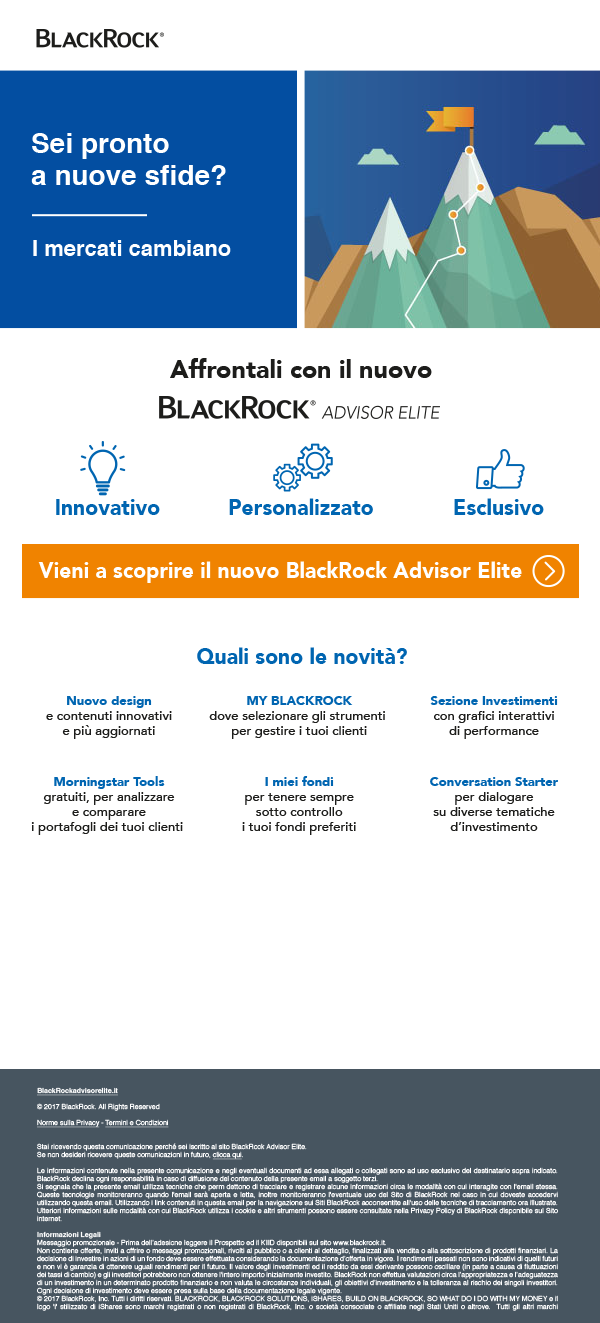
<style>
.page{position:relative;width:600px;height:1323px;background:#ffffff}
.page>*{position:absolute;margin:0}
.t1{font:28px/32px "Helvetica-Bold";color:#ffffff}
.t2{font:22px "Helvetica-Bold";color:#ffffff}
.t3{font:25px "Avenir-Black";color:#1d1d1b}
.t4{font:22.3px "Avenir-Black";color:#0065b1;scale:0.95 1}
.t5{font:22.3px "Avenir-Black";color:#ffffff;scale:0.95 1}
.t6{font:13px/15px "Avenir-Medium";color:#1d1d1b}
.t7{font:13px/15px "Avenir-Black";color:#0065b1}
.t8{font:7px/8px "Helvetica";color:#ffffff}
.t9{font:7px/8px "Helvetica-Bold";color:#ffffff;text-decoration:underline}
.t10{font:7px/8px "Helvetica";color:#ffffff;text-decoration:underline}
.t11{font:7px/8px "Helvetica-Bold";color:#ffffff}
</style>
<div class="page">
<p class="t1" style="left:31px;top:133px;width:195px;height:52px">Sei pronto<br>a nuove sfide?</p>
<p class="t2" style="left:33px;top:240px;width:198px;height:16px">I mercati cambiano</p>
<p class="t3" style="left:170px;top:358px;width:262px;height:20px">Affrontali con il nuovo</p>
<p class="t4" style="left:56px;top:499px;width:104px;height:16px">Innovativo</p>
<p class="t4" style="left:229px;top:498px;width:144px;height:17px">Personalizzato</p>
<p class="t4" style="left:454px;top:498px;width:90px;height:17px">Esclusivo</p>
<p class="t5" style="left:38px;top:561px;width:484px;height:22px">Vieni a scoprire il nuovo BlackRock Advisor Elite</p>
<p class="t4" style="left:197px;top:647px;width:210px;height:17px">Quali sono le novità?</p>
<p class="t6" style="left:46px;top:696px;width:126px;height:43px;text-align:center"><span class="t7">Nuovo design<br></span>e contenuti innovativi<br>e più aggiornati</p>
<p class="t6" style="left:209px;top:696px;width:176px;height:43px;text-align:center"><span class="t7">MY BLACKROCK</span><br>dove selezionare gli strumenti <br>per gestire i tuoi clienti</p>
<p class="t6" style="left:430px;top:696px;width:128px;height:43px;text-align:center"><span class="t7">Sezione Investimenti<br></span>con grafici interattivi<br>di performance</p>
<p class="t6" style="left:31px;top:776px;width:152px;height:59px;text-align:center"><span class="t7">Morningstar Tools<br></span>gratuiti, per analizzare<br>e comparare<br>i portafogli dei tuoi clienti</p>
<p class="t6" style="left:242px;top:776px;width:114px;height:59px;text-align:center"><span class="t7">I miei fondi<br></span>per tenere sempre<br>sotto controllo<br>i tuoi fondi preferiti</p>
<p class="t6" style="left:430px;top:777px;width:128px;height:54px;text-align:center"><span class="t7">Conversation Starter</span><br>per dialogare<br>su diverse tematiche<br>d’investimento</p>
<p class="t8" style="left:37px;top:1087px;width:521px;height:224px;text-align:justify"><span class="t9">BlackRockadvisorelite.it<br></span><br>© 2017 BlackRock. All Rights Reserved<br><br><span class="t10">Norme sulla Privacy</span> - <span class="t10">Termini e Condizioni<br></span><br> <br>Stai ricevendo questa comunicazione perché sei iscritto al sito BlackRock Advisor Elite.<br>Se non desideri ricevere queste comunicazioni in futuro, <span class="t10">clicca qui</span>.<br> <br>Le informazioni contenute nella presente comunicazione e negli eventuali documenti ad essa allegati o collegati sono ad uso esclusivo del destinatario sopra indicato. BlackRock declina ogni responsabilità in caso di diffusione del contenuto della presente email a soggetto terzi.<br>Si segnala che la presente email utilizza tecniche che perm dettono di tracciare e registrare alcune informazioni circa le modalità con cui interagite con l'email stessa. Queste tecnologie monitoreranno quando l'email sarà aperta e letta, inoltre monitoreranno l'eventuale uso del Sito di BlackRock nel caso in cui doveste accedervi utilizzando questa email. Utilizzando i link contenuti in questa email per la navigazione sui Siti BlackRock acconsentite all'uso delle tecniche di tracciamento ora illustrate. Ulteriori informazioni sulle modalità con cui BlackRock utilizza i cookie e altri strumenti possono essere consultate nella Privacy Policy di BlackRock disponibile sul Sito internet.<br> <br><span class="t11">Informazioni Legali<br></span>Messaggio promozionale - Prima dell’adesione leggere il Prospetto ed il KIID disponibili sul sito www.blackrock.it.<br>Non contiene offerte, inviti a offrire o messaggi promozionali, rivolti al pubblico o a clienti al dettaglio, finalizzati alla vendita o alla sottoscrizione di prodotti finanziari. La decisione di investire in azioni di un fondo deve essere effettuata considerando la documentazione d’offerta in vigore. I rendimenti passati non sono indicativi di quelli futuri e non vi è garanzia di ottenere uguali rendimenti per il futuro. Il valore degli investimenti ed il reddito da essi derivante possono oscillare (in parte a causa di fluttuazioni dei tassi di cambio) e gli investitori potrebbero non ottenere l'intero importo inizialmente investito. BlackRock non effettua valutazioni circa l’appropriatezza e l’adeguatezza di un investimento in un determinato prodotto finanziario e non valuta le circostanze individuali, gli obiettivi d’investimento e la tolleranza al rischio dei singoli investitori. Ogni decisione di investimento deve essere presa sulla base della documentazione legale vigente.<br>© 2017 BlackRock, Inc. Tutti i diritti riservati. BLACKROCK, BLACKROCK SOLUTIONS, iSHARES, BUILD ON BLACKROCK, SO WHAT DO I DO WITH MY MONEY e il logo 'i' stilizzato di iShares sono marchi registrati o non registrati di BlackRock, Inc. o società consociate o affiliate negli Stati Uniti o altrove.  Tutti gli altri marchi appartengono ai rispettivi proprietari.</p>
</div>
